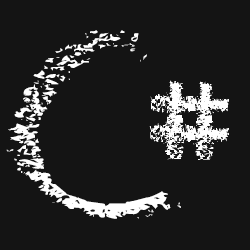
<style>
.page{position:relative;width:250px;height:250px;background:#141414}
.page>*{position:absolute;margin:0}
.t1{font:420px "DKCrayonista";letter-spacing:0.06em;color:#ffffff;scale:1.26 1}
</style>
<div class="page">
<p class="t1" style="left:6px;top:30px;width:175px;height:189px">C</p>
</div>
